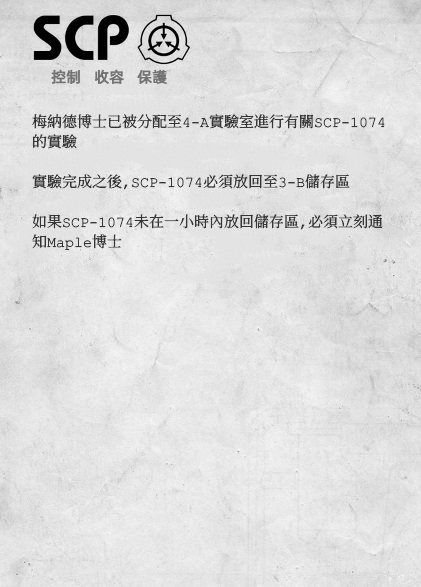
<style>
.page{position:relative;width:421px;height:587px}
.page>*{position:absolute;margin:0}
.t1{font:15px "AlibabaPuHuiTiR";color:#737373;font-weight:bold}
.t2{font:15px/20px "ContainmentBreach-Regular";color:#353535}
</style>
<div class="page">
<p class="t1" style="left:51px;top:69px;width:116px;height:15px">控制   收容   保護</p>
<p class="t2" style="left:32px;top:114px;width:353px;height:136px">梅納德博士已被分配至4-A實驗室進行有關SCP-1074<br>的實驗<br><br>實驗完成之後，SCP-1074必須放回至3-B儲存區<br><br>如果SCP-1074未在一小時內放回儲存區，必須立刻通<br>知Maple博士</p>
</div>
